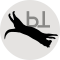
<style>
.page{position:relative;width:60px;height:60px;background:#e5e3e1}
.page>*{position:absolute;margin:0}
.t1{font:24.2px "Code-Pro-Demo";color:#8a8987}
</style>
<div class="page">
<p class="t1" style="left:26px;top:11px;width:24px;height:17px">pt</p>
</div>
